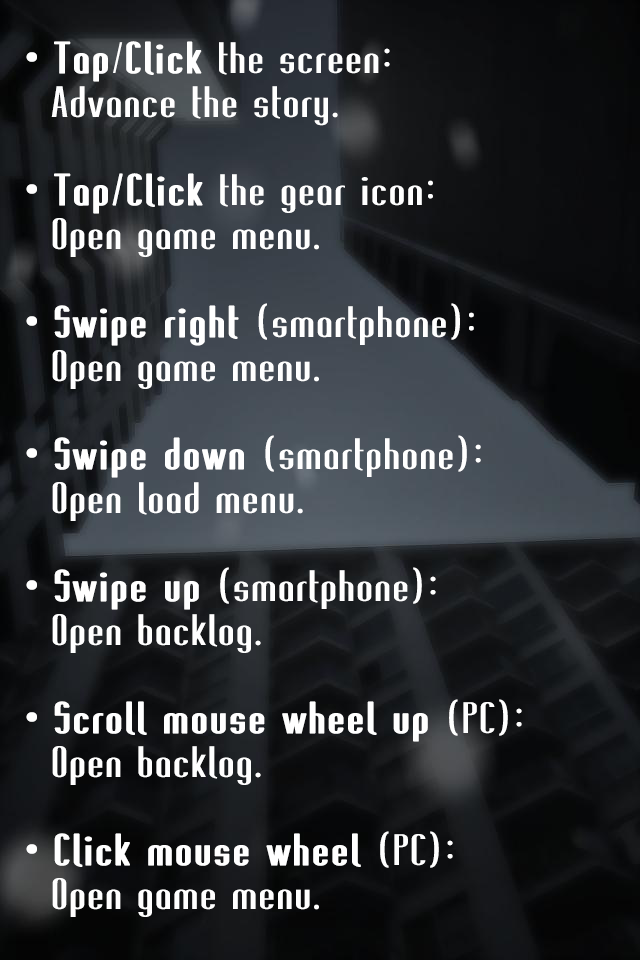
<style>
.page{position:relative;width:640px;height:960px}
.page>*{position:absolute;margin:0}
.t1{font:40px/44px "GLT-CivilizationSans-Display";letter-spacing:0.01em;color:#ffffff;scale:1.1 1}
.t2{font:40px/44px "GLT-CivilizationSans-Display";letter-spacing:0.01em;color:#ffffff;font-weight:bold;scale:1.1 1}
</style>
<div class="page">
<p class="t1" style="left:26px;top:41px;width:496px;height:876px"><span class="t2">• Tap</span>/<span class="t2">Click</span> the screen:<br>  Advance the story.<br><br><span class="t2">• Tap/Click</span> the gear icon:<br>  Open game menu.<br><br><span class="t2">• Swipe right</span> (smartphone):<br>  Open game menu.<br><br><span class="t2">• Swipe down</span> (smartphone):<br>  Open load menu.<br><span class="t2"><br>• Swipe up</span> (smartphone):<br>  Open backlog.<br><span class="t2"><br>• Scroll mouse wheel up</span> (PC):<br>  Open backlog.<br><span class="t2"><br>• Click mouse wheel</span> (PC):<br>  Open game menu.</p>
</div>
